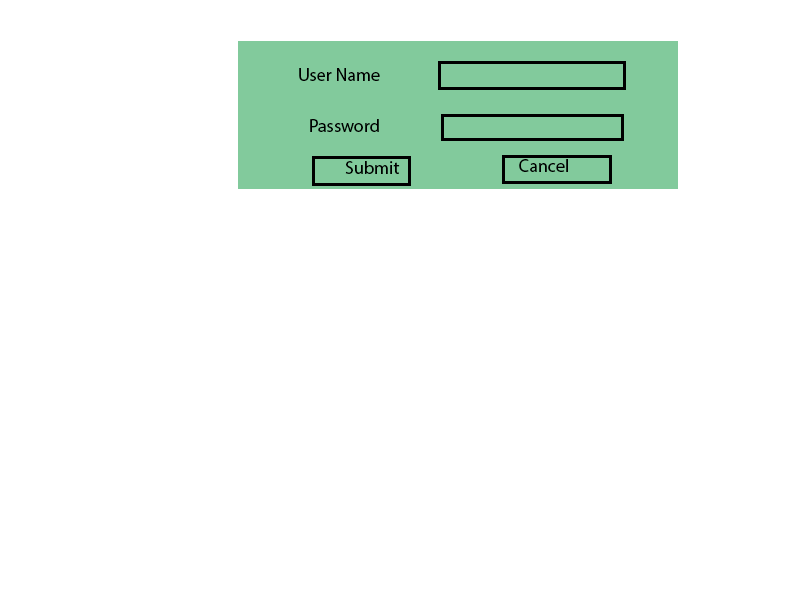
<style>
.page{position:relative;width:800px;height:600px;background:#ffffff}
.page>*{position:absolute;margin:0}
.t1{font:18px "MyriadPro-Regular";color:#000000}
</style>
<div class="page">
<p class="t1" style="left:299px;top:68px;width:81px;height:13px">User Name</p>
<p class="t1" style="left:310px;top:119px;width:69px;height:13px">Password</p>
<p class="t1" style="left:345px;top:161px;width:55px;height:13px">Submit</p>
<p class="t1" style="left:519px;top:159px;width:49px;height:13px">Cancel</p>
</div>
